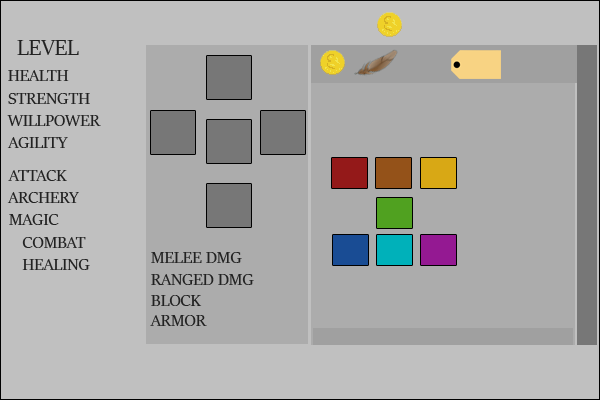
<style>
.page{position:relative;width:600px;height:400px;background:#c0c0c0}
.page>*{position:absolute;margin:0}
.t1{font:24px "SitkaBanner";color:#222222}
.t2{font:18px "SitkaBanner";color:#222222}
</style>
<div class="page">
<p class="t1" style="left:17px;top:40px;width:62px;height:15px">LEVEL</p>
<p class="t2" style="left:8px;top:70px;width:61px;height:11px">HEALTH</p>
<p class="t2" style="left:8px;top:93px;width:82px;height:11px">STRENGTH</p>
<p class="t2" style="left:7px;top:115px;width:94px;height:11px">WILLPOWER</p>
<p class="t2" style="left:7px;top:137px;width:61px;height:11px">AGILITY</p>
<p class="t2" style="left:8px;top:170px;width:59px;height:11px">ATTACK</p>
<p class="t2" style="left:7px;top:192px;width:72px;height:11px">ARCHERY</p>
<p class="t2" style="left:9px;top:214px;width:50px;height:11px">MAGIC</p>
<p class="t2" style="left:22px;top:237px;width:64px;height:11px">COMBAT</p>
<p class="t2" style="left:151px;top:252px;width:91px;height:11px">MELEE DMG</p>
<p class="t2" style="left:22px;top:259px;width:68px;height:11px">HEALING</p>
<p class="t2" style="left:151px;top:274px;width:103px;height:11px">RANGED DMG</p>
<p class="t2" style="left:151px;top:295px;width:51px;height:11px">BLOCK</p>
<p class="t2" style="left:150px;top:315px;width:57px;height:11px">ARMOR</p>
</div>
